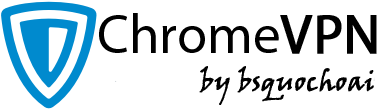
<style>
.page{position:relative;width:378px;height:110px;background:#ffffff}
.page>*{position:absolute;margin:0}
.t1{font:55px "MyriadPro-Regular";color:#000000}
.t2{font:55px "MyriadPro-Regular";color:#000000;font-weight:bold}
.t3{font:26px "VinerHandITC";color:#000000;font-weight:bold}
</style>
<div class="page">
<p class="t1" style="left:99px;top:13px;width:278px;height:41px">Chrome<span class="t2">VPN</span></p>
<p class="t3" style="left:199px;top:66px;width:175px;height:39px">by bsquochoai</p>
</div>
